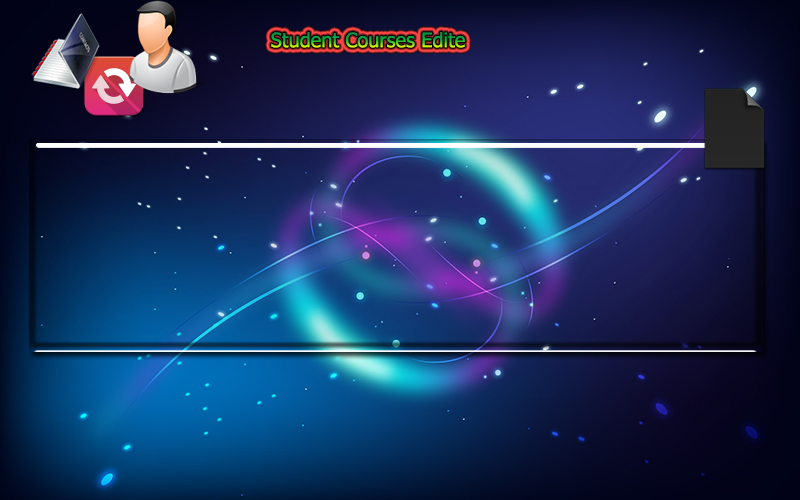
<style>
.page{position:relative;width:800px;height:500px}
.page>*{position:absolute;margin:0}
.t1{font:20px "Tahoma"}
</style>
<div class="page">
<p class="t1" style="left:271px;top:32px;width:194px;height:16px">Student Courses Edite</p>
</div>
